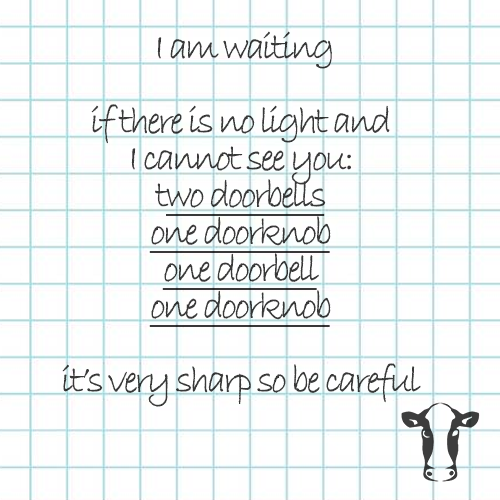
<style>
.page{position:relative;width:500px;height:500px}
.page>*{position:absolute;margin:0}
.t1{font:39px/37px "BradleyHandITC";letter-spacing:-0.1em;color:#393939;font-weight:bold}
.t2{font:39px/37px "BradleyHandITC";letter-spacing:-0.1em;color:#393939;font-weight:bold;text-decoration:underline}
</style>
<div class="page">
<p class="t1" style="left:62px;top:31px;width:359px;height:376px;text-align:center">I am waiting<br><br>if there is no light and<br>I cannot see you:<br>t<span class="t2">wo doorbells<br>one doorknob<br>one doorbell<br>one doorknob<br></span><br>it’s very sharp so be careful</p>
</div>
